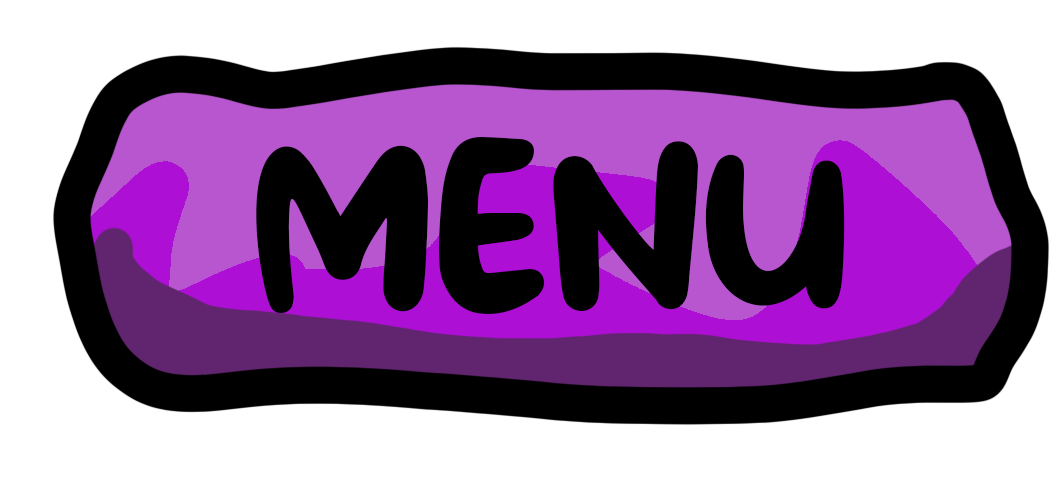
<style>
.page{position:relative;width:1056px;height:477px;background:#ffffff}
.page>*{position:absolute;margin:0}
.t1{font:200px "Pineapple-Days";color:#000000}
</style>
<div class="page">
<p class="t1" style="left:256px;top:137px;width:589px;height:177px">MENU</p>
</div>
